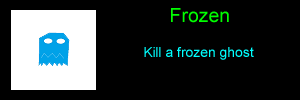
<style>
.page{position:relative;width:300px;height:100px;background:#000000}
.page>*{position:absolute;margin:0}
.t1{font:19.4px "ArialMT";color:#00ff00}
.t2{font:13.9px "ArialMT";color:#00ffff}
</style>
<div class="page">
<p class="t1" style="left:171px;top:8px;width:58px;height:15px">Frozen</p>
<p class="t2" style="left:144px;top:47px;width:110px;height:13px">Kill a frozen ghost</p>
</div>
